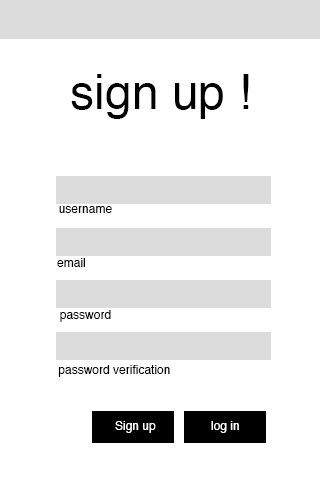
<style>
.page{position:relative;width:320px;height:480px;background:#ffffff}
.page>*{position:absolute;margin:0}
.t1{font:48px "Helvetica";color:#000000}
.t2{font:12px "Helvetica";color:#000000}
.t3{font:12px "Helvetica";color:#ffffff}
</style>
<div class="page">
<p class="t1" style="left:71px;top:74px;width:178px;height:45px">sign up !</p>
<p class="t2" style="left:59px;top:206px;width:53px;height:7px">username</p>
<p class="t2" style="left:57px;top:258px;width:28px;height:9px">email</p>
<p class="t2" style="left:60px;top:310px;width:51px;height:12px">password</p>
<p class="t2" style="left:58px;top:365px;width:112px;height:12px">password verification</p>
<p class="t3" style="left:115px;top:421px;width:41px;height:12px">Sign up</p>
<p class="t3" style="left:211px;top:421px;width:28px;height:12px">log in</p>
</div>
